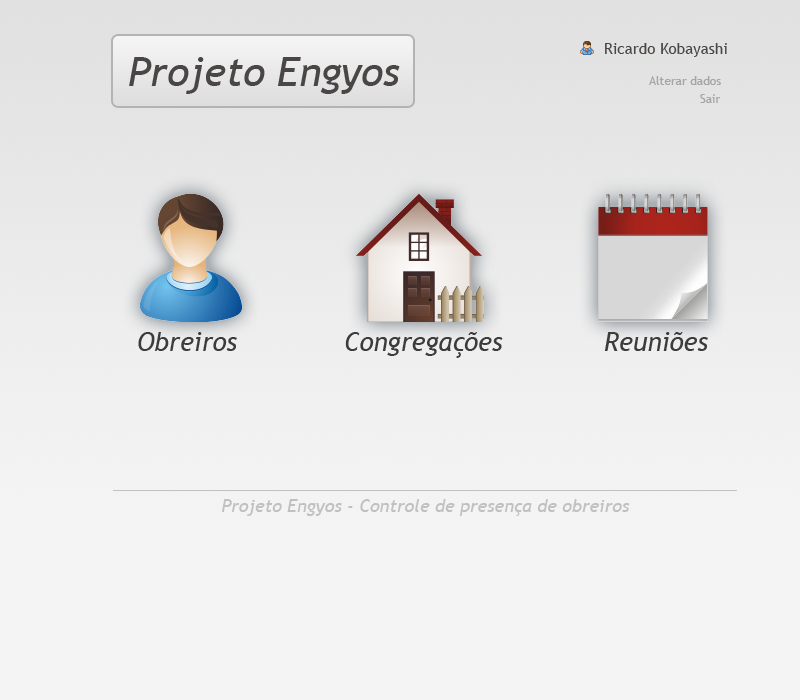
<style>
.page{position:relative;width:800px;height:700px;background:#f4f4f4}
.page>*{position:absolute;margin:0}
.t1{font:15.3px "TrebuchetMS";color:#4b4646}
.t2{font:40.7px "TrebuchetMS-Italic";color:#4b4646}
.t3{font:12px "TrebuchetMS";color:#a5a5a5}
.t4{font:12px "TrebuchetMS";color:#a4a4a4}
.t5{font:26px "TrebuchetMS-Italic";color:#3d3c3c}
.t6{font:18px "TrebuchetMS-Italic";color:#c0c0c0}
</style>
<div class="page">
<p class="t1" style="left:605px;top:43px;width:122px;height:14px">Ricardo Kobayashi</p>
<p class="t2" style="left:129px;top:57px;width:271px;height:37px">Projeto Engyos</p>
<p class="t3" style="left:649px;top:76px;width:72px;height:9px">Alterar dados</p>
<p class="t4" style="left:700px;top:94px;width:21px;height:9px">Sair</p>
<p class="t5" style="left:138px;top:332px;width:99px;height:19px">Obreiros</p>
<p class="t5" style="left:345px;top:332px;width:158px;height:26px">Congregações</p>
<p class="t5" style="left:604px;top:332px;width:104px;height:19px">Reuniões</p>
<p class="t6" style="left:222px;top:499px;width:408px;height:17px">Projeto Engyos - Controle de presença de obreiros</p>
</div>
